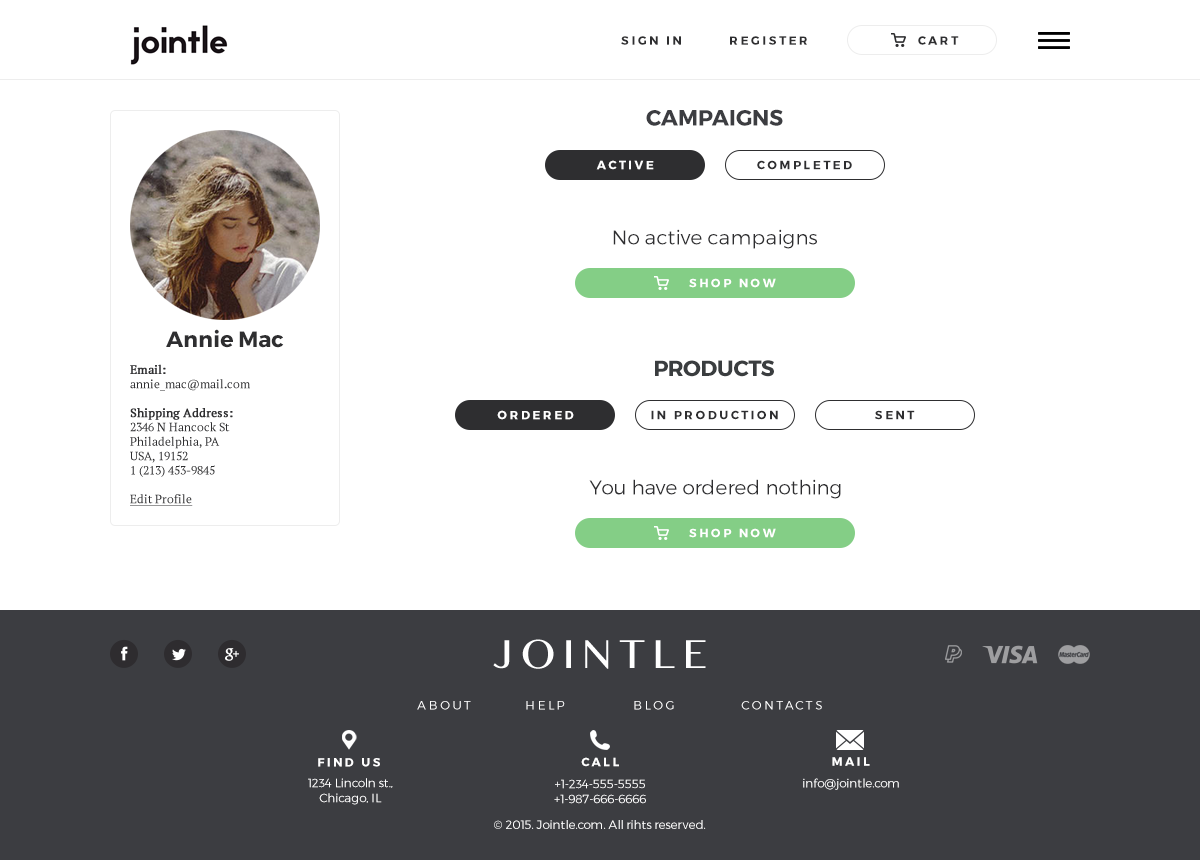
<style>
.page{position:relative;width:1200px;height:860px;background:#ffffff}
.page>*{position:absolute;margin:0}
.t1{font:12px "Montserrat-Bold";letter-spacing:0.2em;color:#2e2e30}
.t2{font:22px "Montserrat-Bold";color:#3c3d41}
.t3{font:12px "Montserrat-Bold";letter-spacing:0.2em;color:#ffffff}
.t4{font:20px "Montserrat-Light";color:#2e2e30}
.t5{font:22px "Montserrat-Bold";color:#2e2e30}
.t6{font:12px "PTSerif-Regular";color:#2e2e30}
.t7{font:12px "PTSerif-Regular";color:#2e2e30;font-weight:bold}
.t8{font:12px "PTSerif-Regular";color:#2e2e30;text-decoration:underline}
.t9{font:22px "Montserrat-Bold";letter-spacing:-0.02em;color:#3a3d3f}
.t10{font:36px "BanglaMN";letter-spacing:0.2em;color:#ffffff}
.t11{font:12px "Montserrat-Light";letter-spacing:0.2em;color:#ffffff}
.t12{font:12px/12px "Montserrat-Light";color:#ffffff}
.t13{font:12px "Montserrat-Light";color:#ffffff}
</style>
<div class="page">
<p class="t1" style="left:621px;top:36px;width:186px;height:9px">SIGN IN  REGISTER</p>
<p class="t1" style="left:918px;top:36px;width:41px;height:9px">CART</p>
<p class="t2" style="left:646px;top:109px;width:137px;height:17px">CAMPAIGNS</p>
<p class="t3" style="left:596px;top:160px;width:58px;height:10px">ACTIVE</p>
<p class="t1" style="left:757px;top:160px;width:95px;height:10px">COMPLETED</p>
<p class="t4" style="left:613px;top:229px;width:204px;height:20px">No active campaigns</p>
<p class="t3" style="left:689px;top:278px;width:87px;height:10px">SHOP NOW</p>
<p class="t5" style="left:166px;top:329px;width:118px;height:19px">Annie Mac</p>
<p class="t6" style="left:130px;top:364px;width:120px;height:142px"><span class="t7">Email:<br></span>annie_mac@mail.com<br><span class="t7"><br>Shipping Address:<br></span>2346 N Hancock St<br>Philadelphia, PA<br>USA, 19152<br>1 (213) 453-9845<br><br><span class="t8">Edit Profile</span></p>
<p class="t9" style="left:655px;top:360px;width:119px;height:17px">PRODUCTS</p>
<p class="t3" style="left:497px;top:410px;width:77px;height:10px">ORDERED</p>
<p class="t1" style="left:651px;top:410px;width:127px;height:10px">IN PRODUCTION</p>
<p class="t1" style="left:875px;top:410px;width:40px;height:10px">SENT</p>
<p class="t4" style="left:589px;top:479px;width:252px;height:20px">You have ordered nothing</p>
<p class="t3" style="left:689px;top:528px;width:87px;height:10px">SHOP NOW</p>
<p class="t10" style="left:493px;top:639px;width:213px;height:30px">JOINTLE</p>
<p class="t11" style="left:417px;top:701px;width:405px;height:9px">ABOUT  HELP  BLOG  CONTACTS</p>
<p class="t3" style="left:318px;top:758px;width:62px;height:9px">FIND US</p>
<p class="t3" style="left:581px;top:757px;width:38px;height:10px">CALL</p>
<p class="t3" style="left:832px;top:757px;width:38px;height:9px">MAIL</p>
<p class="t12" style="left:308px;top:778px;width:85px;height:27px;text-align:center">1234 Lincoln st.,<br>Chicago, IL</p>
<p class="t12" style="left:554px;top:779px;width:92px;height:25px;text-align:center">+1-234-555-5555<br>+1-987-666-6666</p>
<p class="t13" style="left:803px;top:778px;width:96px;height:12px">info@jointle.com</p>
<p class="t13" style="left:494px;top:820px;width:212px;height:9px">© 2015. Jointle.com. All rihts reserved.</p>
</div>
